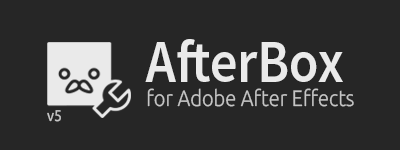
<style>
.page{position:relative;width:400px;height:150px;background:#262626}
.page>*{position:absolute;margin:0}
.t1{font:22.2px "Ubuntu-Light";color:#c6c6c6;scale:0.9 1}
.t2{font:59.9px "SourceSansPro-Semibold";color:#eaeaea;scale:0.9 1}
.t3{font:15.5px "Ubuntu";color:#c6c6c6;scale:0.9 1}
</style>
<div class="page">
<p class="t1" style="left:145px;top:39px;width:209px;height:68px"><span class="t2">AfterBox<br></span>for Adobe After Effects</p>
<p class="t3" style="left:47px;top:110px;width:14px;height:12px">v5</p>
</div>
